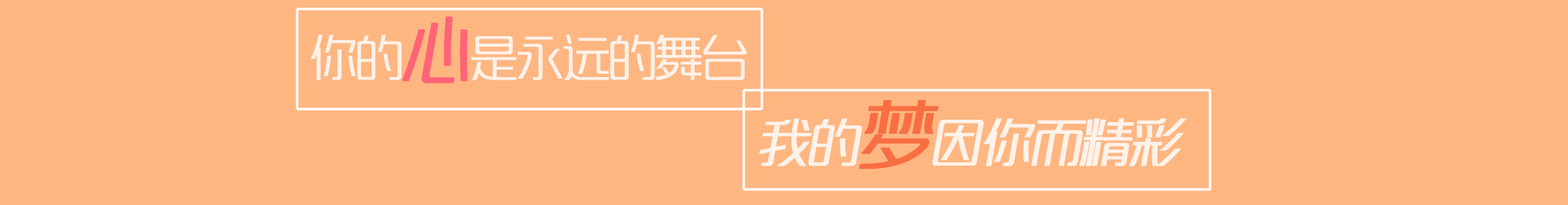
<style>
.page{position:relative;width:1568px;height:205px;background:#ffb681}
.page>*{position:absolute;margin:0}
.t1{font:47.6px "MFLangQian_Noncommercial-Light";letter-spacing:-0.025em;color:#ffffff}
.t2{font:68.4px "MFLangQian_Noncommercial-Light";letter-spacing:-0.025em;color:#ff4973;font-weight:bold;font-style:italic}
.t3{font:49.6px "MFLangQian_Noncommercial-Light";letter-spacing:-0.025em;color:#ffffff;font-variant:small-caps;font-weight:bold;font-style:italic}
.t4{font:71.7px "MFLangQian_Noncommercial-Light";letter-spacing:-0.025em;color:#f6572c;font-variant:small-caps;font-weight:bold;font-style:italic}
</style>
<div class="page">
<p class="t1" style="left:310px;top:16px;width:437px;height:68px;opacity:0.8">你的<span class="t2">心</span>是永远的舞台</p>
<p class="t3" style="left:759px;top:100px;width:427px;height:69px;opacity:0.8">我的<span class="t4">梦</span>因你而精彩</p>
</div>
